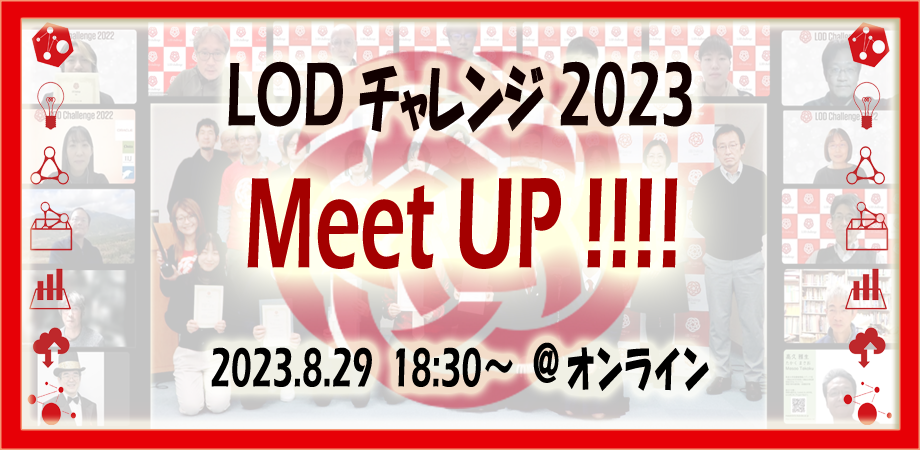
<style>
.page{position:relative;width:920px;height:450px}
.page>*{position:absolute;margin:0}
.t1{font:73.3px "HGPSoeiKakupoptai";color:#110000;scale:0.6 1}
.t2{font:93.3px "ErasITC-Demi";color:#110000;scale:0.6 1}
.t3{font:133.3px "ErasITC-Demi";color:#a40000;scale:0.6 1}
.t4{font:56.7px "ErasITC-Demi";color:#000000;scale:0.6 1}
.t5{font:56.7px "MS-Gothic";color:#000000;scale:0.6 1}
.t6{font:66.7px "HGSSoeiKakupoptai";color:#000000;scale:0.6 1}
.t7{font:48px "HGSSoeiKakupoptai";color:#000000;scale:0.6 1}
</style>
<div class="page">
<p class="t1" style="left:228px;top:61px;width:464px;height:72px"><span class="t2">LOD </span>チャレンジ<span class="t2"> 2023</span></p>
<p class="t3" style="left:247px;top:178px;width:431px;height:91px">Meet UP !!!!</p>
<p class="t4" style="left:211px;top:342px;width:498px;height:49px">2023.8.29  18:30<span class="t5">～ </span><span class="t6">＠</span><span class="t7">オンライン</span></p>
</div>
